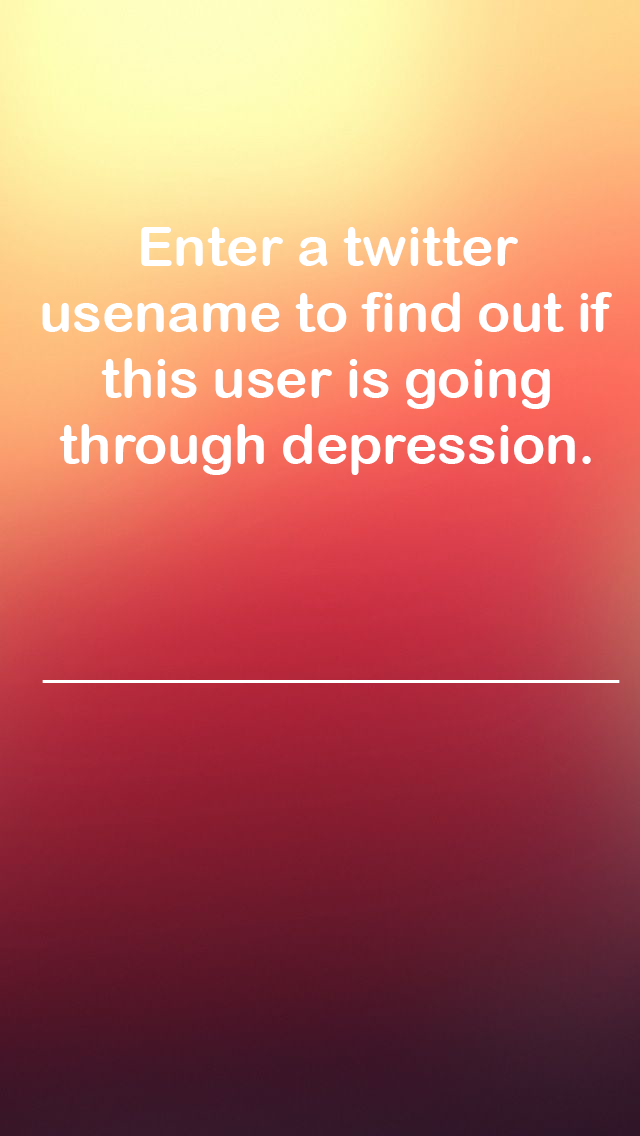
<style>
.page{position:relative;width:640px;height:1136px}
.page>*{position:absolute;margin:0}
.t1{font:55px "ArialRoundedMTBold";color:#ffffff}
.t2{font:48px "ArialRoundedMTBold";color:#ffffff}
</style>
<div class="page">
<p class="t1" style="left:42px;top:227px;width:570px;height:248px;text-align:center">Enter a twitter usename to find out if this user is going through depression.</p>
<p class="t2" style="left:42px;top:680px;width:578px;height:3px">________________________</p>
</div>
